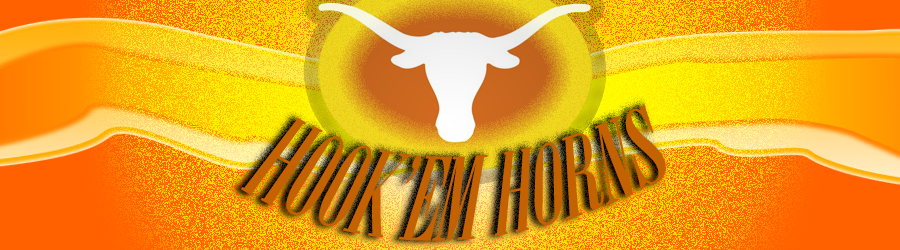
<style>
.page{position:relative;width:900px;height:250px}
.page>*{position:absolute;margin:0}
.t1{font:53.1px "Onyx";color:#c46100;scale:1.35 1}
</style>
<div class="page">
<p class="t1" style="left:241px;top:103px;width:425px;height:138px;rotate:-52deg">HOOK’EM HORNS</p>
</div>
